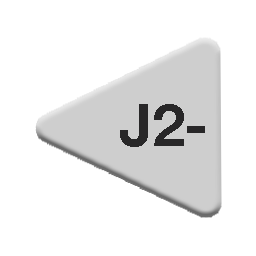
<style>
.page{position:relative;width:256px;height:256px;background:#ffffff}
.page>*{position:absolute;margin:0}
.t1{font:58.6px "HelveticaNeue-Bold";color:#282728}
</style>
<div class="page">
<p class="t1" style="left:120px;top:104px;width:85px;height:43px">J2-</p>
</div>
